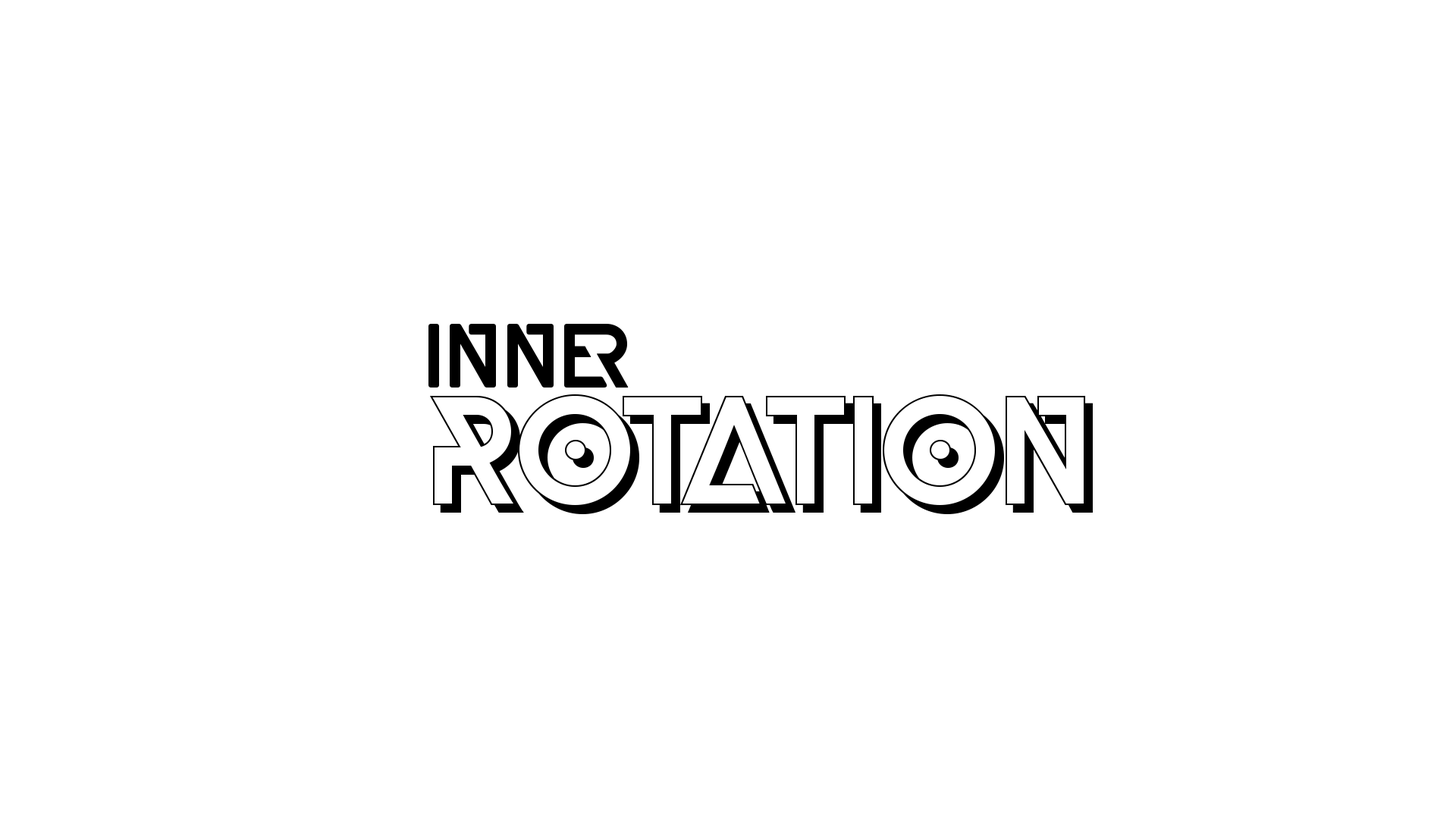
<style>
.page{position:relative;width:1456px;height:819px;background:#ffffff}
.page>*{position:absolute;margin:0}
.t1{font:91px "RobloxBlackRound";color:#000000}
.t2{font:151.7px "RobloxBlackShadow";color:#000000}
</style>
<div class="page">
<p class="t1" style="left:428px;top:324px;width:201px;height:64px">INNER</p>
<p class="t2" style="left:430px;top:394px;width:663px;height:120px">ROTATION</p>
</div>
